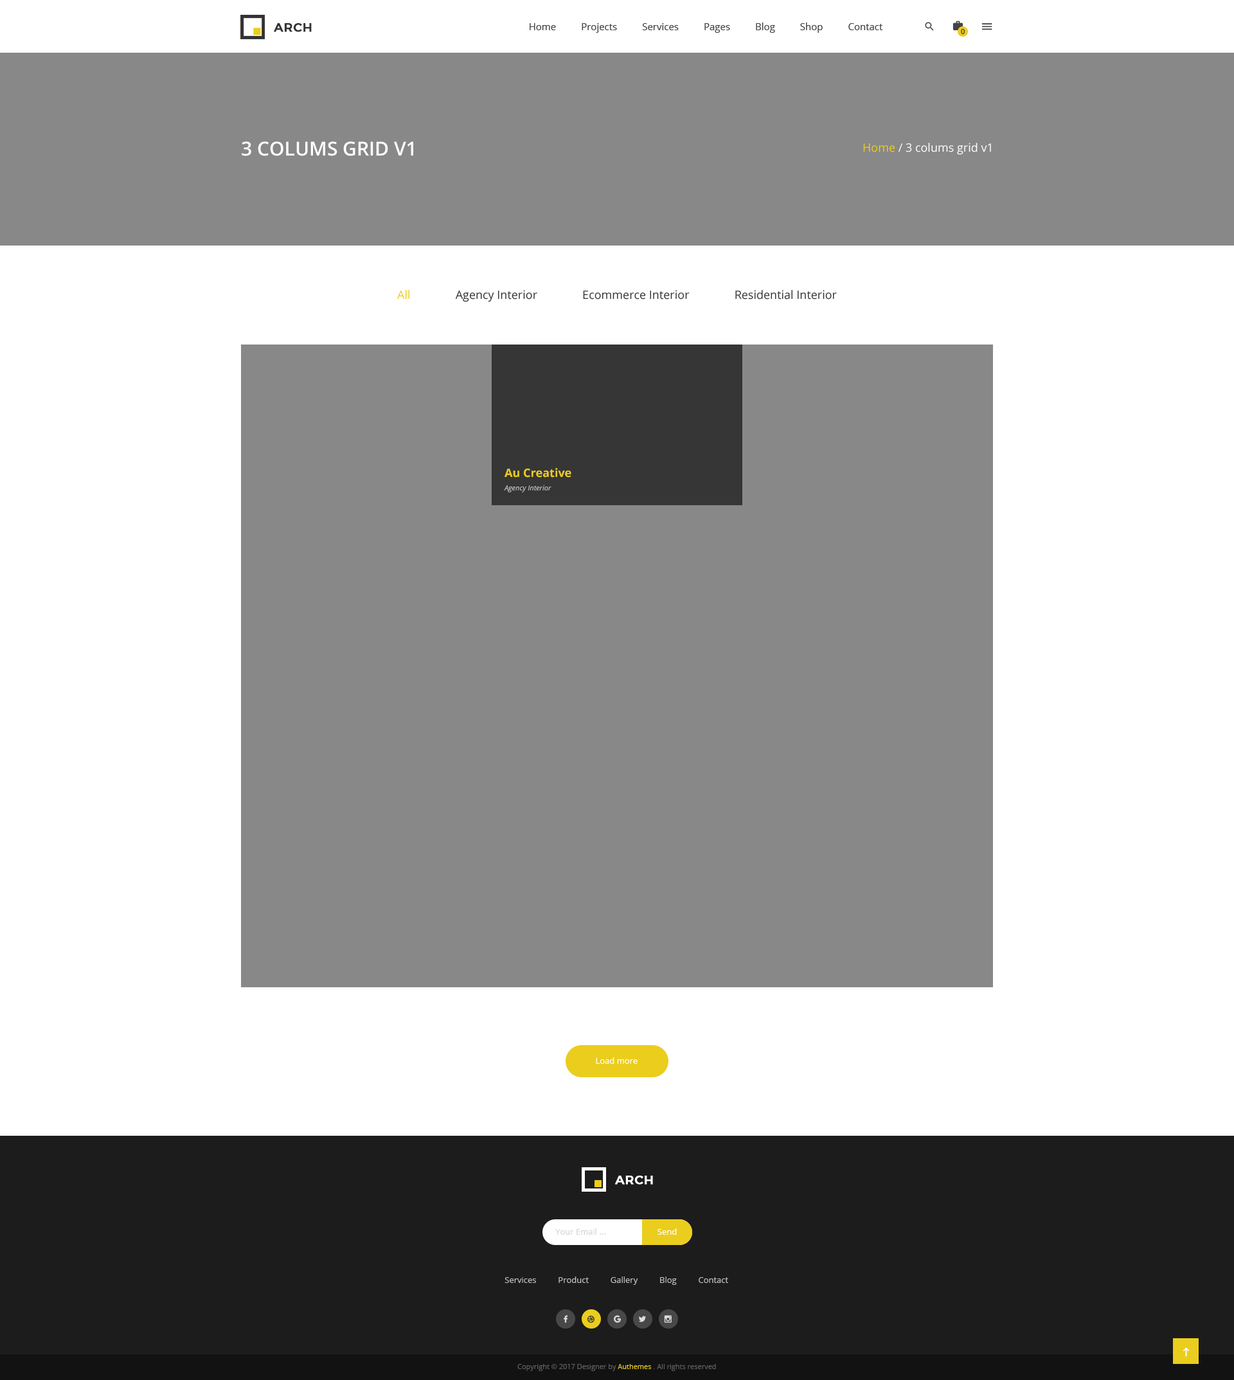
<style>
.page{position:relative;width:1234px;height:1380px;background:#888888}
.page>*{position:absolute;margin:0}
.t1{font:12.2px "Montserrat-Medium";letter-spacing:0.025em;color:#333333;text-transform:uppercase;font-weight:bold}
.t2{font:9.6px "OpenSans";color:#444444}
.t3{font:7.1px "OpenSans";color:#333333}
.t4{font:19.3px "OpenSans-Semibold";color:#ffffff;text-transform:uppercase}
.t5{font:11.6px "OpenSans";color:#ffffff}
.t6{font:11.6px "OpenSans";color:#ebcd1e}
.t7{font:11.6px "OpenSans";color:#333333}
.t8{font:11.6px "OpenSans-Bold";color:#ebcd1e}
.t9{font:7.1px "OpenSans-Italic";color:#d5d5d5}
.t10{font:8.4px "OpenSans";color:#ffffff}
.t11{font:12.2px "Montserrat-Medium";letter-spacing:0.025em;color:#ffffff;text-transform:uppercase;font-weight:bold}
.t12{font:8.4px "OpenSans";color:#d6d6d6}
.t13{font:8.4px "OpenSans";color:#c2c2c2}
.t14{font:7.1px "OpenSans";color:#626262}
.t15{font:7.1px "OpenSans";color:#ebcd1e}
</style>
<div class="page">
<p class="t1" style="left:274px;top:23px;width:38px;height:9px">arch</p>
<p class="t2" style="left:530px;top:22px;width:353px;height:11px">Home          Projects          Services          Pages          Blog          Shop          Contact</p>
<p class="t3" style="left:961px;top:29px;width:4px;height:5px">0</p>
<p class="t4" style="left:242px;top:141px;width:171px;height:15px">3 colums grid v1</p>
<p class="t5" style="left:863px;top:143px;width:128px;height:12px"><span class="t6">Home</span> / 3 colums grid v1</p>
<p class="t7" style="left:397px;top:290px;width:440px;height:12px"><span class="t6">All</span>               Agency Interior               Ecommerce Interior               Residential Interior</p>
<p class="t8" style="left:505px;top:468px;width:67px;height:10px">Au Creative</p>
<p class="t9" style="left:504px;top:485px;width:48px;height:7px">Agency Interior</p>
<p class="t10" style="left:596px;top:1058px;width:42px;height:6px">Load more</p>
<p class="t11" style="left:615px;top:1176px;width:38px;height:9px">arch</p>
<p class="t12" style="left:555px;top:1228px;width:51px;height:7px">Your Email ...</p>
<p class="t10" style="left:658px;top:1228px;width:19px;height:7px">Send</p>
<p class="t13" style="left:505px;top:1277px;width:223px;height:8px">Services          Product          Gallery          Blog          Contact</p>
<p class="t14" style="left:518px;top:1364px;width:198px;height:7px">Copyright © 2017 Designer by <span class="t15">Authemes </span>. All rights reserved</p>
</div>
